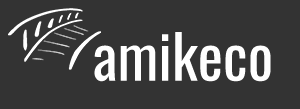
<style>
.page{position:relative;width:300px;height:109px;background:#333333}
.page>*{position:absolute;margin:0}
.t1{font:60px "Oswald-Regular";color:#ffffff}
</style>
<div class="page">
<p class="t1" style="left:94px;top:32px;width:177px;height:50px">amikeco</p>
</div>
